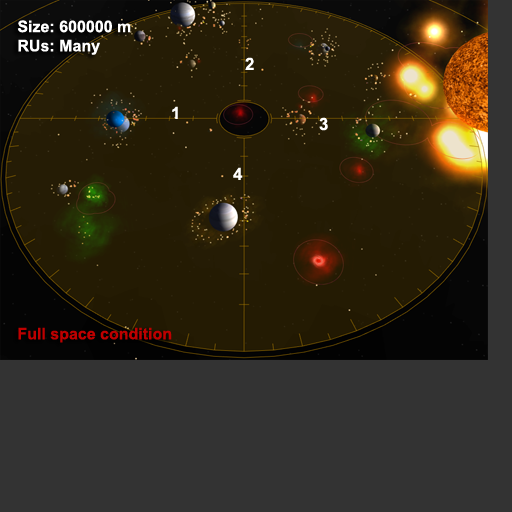
<style>
.page{position:relative;width:512px;height:512px;background:#333333}
.page>*{position:absolute;margin:0}
.t1{font:16px "Arial-BoldMT";color:#ffffff}
.t2{font:16px "Arial-BoldMT";color:#be0000}
.t3{font:17px "Arial-BoldMT";color:#ffffff}
</style>
<div class="page">
<p class="t1" style="left:17px;top:20px;width:155px;height:323px">Size: 600000 m<br>RUs: Many<br><span class="t2"><br><br><br><br><br><br><br><br><br><br><br><br><br><br>Full space condition</span></p>
<p class="t3" style="left:245px;top:57px;width:9px;height:13px">2</p>
<p class="t3" style="left:172px;top:106px;width:6px;height:13px">1</p>
<p class="t3" style="left:319px;top:117px;width:9px;height:14px">3</p>
<p class="t3" style="left:233px;top:167px;width:10px;height:13px">4</p>
</div>
